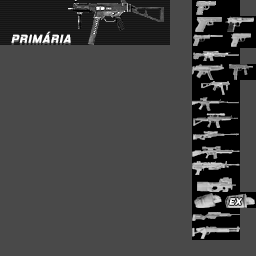
<style>
.page{position:relative;width:256px;height:256px;background:#494949}
.page>*{position:absolute;margin:0}
.t1{font:11.5px "HemiHeadRg-BoldItalic";letter-spacing:0.08em;color:#ffffff;text-transform:uppercase}
.t2{font:9.1px "HemiHeadRg-BoldItalic";letter-spacing:0.08em;color:#ffffff;text-transform:uppercase;scale:0.96 1}
</style>
<div class="page">
<p class="t1" style="left:11px;top:31px;width:60px;height:12px">PRIMÁRIA</p>
<p class="t2" style="left:229px;top:198px;width:14px;height:7px">EX</p>
</div>
